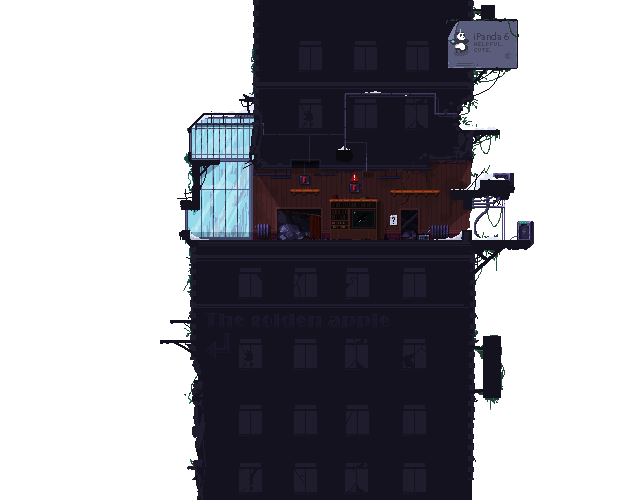
<style>
.page{position:relative;width:640px;height:500px;background:#ffffff}
.page>*{position:absolute;margin:0}
.t1{font:10px "MyriadPro-Regular";color:#464752}
.t2{font:20px "Broadway";color:#272237}
</style>
<div class="page">
<p class="t1" style="left:474px;top:32px;width:35px;height:8px">iPanda 6</p>
<p class="t2" style="left:204px;top:313px;width:185px;height:15px">The golden apple</p>
</div>
